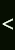
<style>
.page{position:relative;width:15px;height:50px;background:#060e01}
.page>*{position:absolute;margin:0}
.t1{font:18px "MSReferenceSansSerif";color:#f2ffec}
</style>
<div class="page">
<p class="t1" style="left:2px;top:18px;width:11px;height:12px">&lt;</p>
</div>
